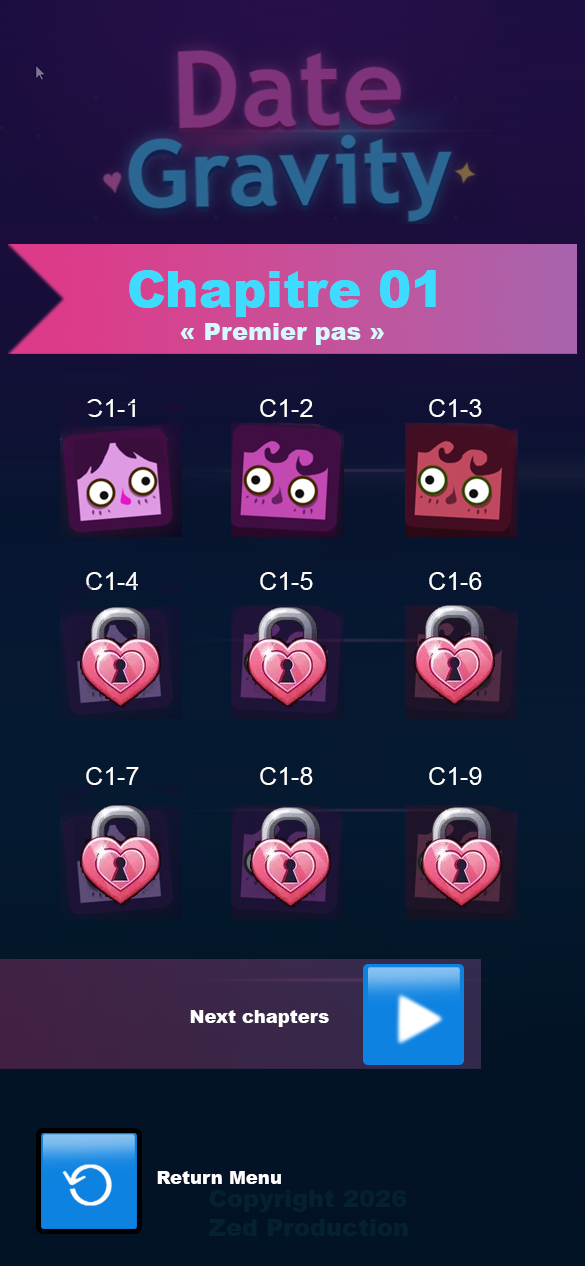
<style>
.page{position:relative;width:585px;height:1266px}
.page>*{position:absolute;margin:0}
.t1{font:50px "Arial-Black";color:#3ddcff}
.t2{font:24px "Arial-Black";color:#d8f8ff}
.t3{font:25px "ArialMT";color:#ffffff}
.t4{font:18px "Arial-Black";color:#ffffff}
.t5{font:24px "Arial-Black";color:#042032}
</style>
<div class="page">
<p class="t1" style="left:129px;top:270px;width:307px;height:47px">Chapitre 01</p>
<p class="t2" style="left:180px;top:323px;width:204px;height:22px">« Premier pas »</p>
<p class="t3" style="left:86px;top:399px;width:49px;height:18px">C1-1</p>
<p class="t3" style="left:260px;top:399px;width:53px;height:18px">C1-2</p>
<p class="t3" style="left:429px;top:399px;width:53px;height:18px">C1-3</p>
<p class="t3" style="left:86px;top:572px;width:52px;height:18px">C1-4</p>
<p class="t3" style="left:260px;top:572px;width:53px;height:18px">C1-5</p>
<p class="t3" style="left:429px;top:572px;width:53px;height:18px">C1-6</p>
<p class="t3" style="left:86px;top:767px;width:53px;height:18px">C1-7</p>
<p class="t3" style="left:260px;top:767px;width:53px;height:18px">C1-8</p>
<p class="t3" style="left:429px;top:767px;width:53px;height:18px">C1-9</p>
<p class="t4" style="left:190px;top:1010px;width:139px;height:17px">Next chapters</p>
<p class="t4" style="left:157px;top:1171px;width:124px;height:13px">Return Menu</p>
<p class="t5" style="left:208px;top:1190px;width:200px;height:46px">Copyright 2026<br>Zed Production</p>
</div>
